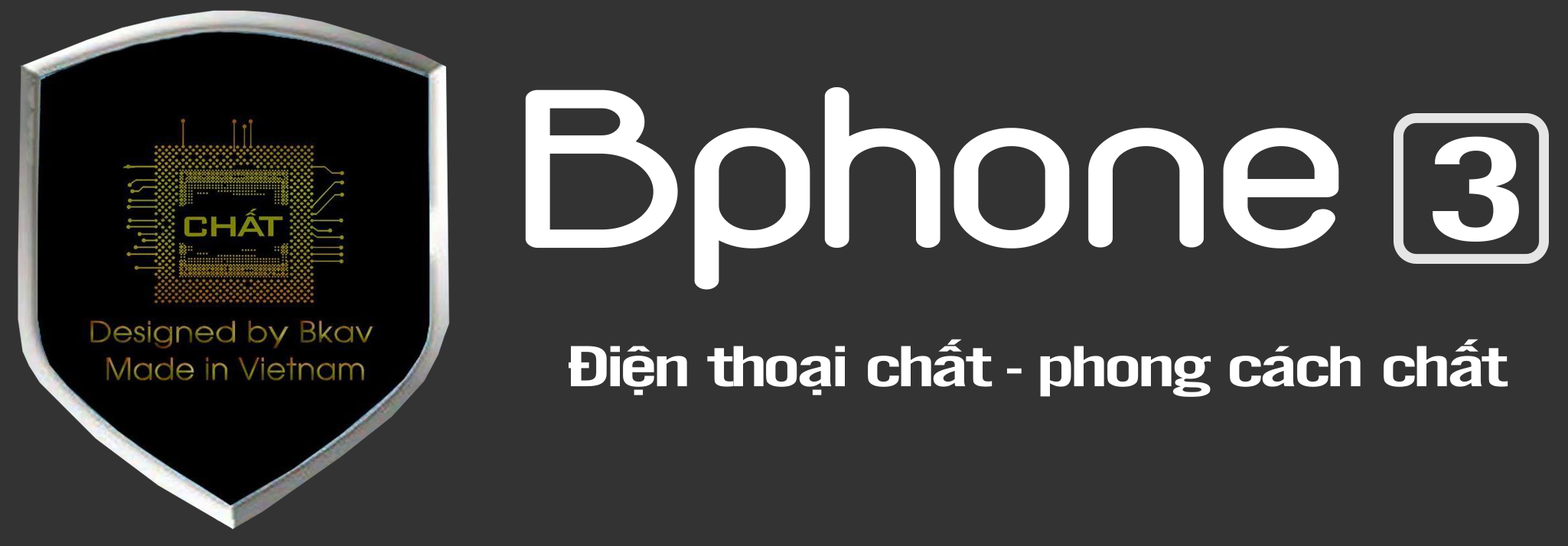
<style>
.page{position:relative;width:1568px;height:546px;background:#333333}
.page>*{position:absolute;margin:0}
.t1{font:239.1px "UTM-Duepuntozero";color:#ffffff;scale:1.33 1}
.t2{font:153.1px "UTM-Alter-Gothic";color:#ffffff;scale:1.67 1}
.t3{font:60.1px "UTM-Alter-Gothic";letter-spacing:-0.05em;color:#ffffff;scale:1.67 1}
</style>
<div class="page">
<p class="t1" style="left:525px;top:87px;width:814px;height:203px">Bphone</p>
<p class="t2" style="left:1433px;top:136px;width:86px;height:106px">3</p>
<p class="t3" style="left:569px;top:339px;width:939px;height:58px">Điện thoại chất - phong cách chất</p>
</div>
